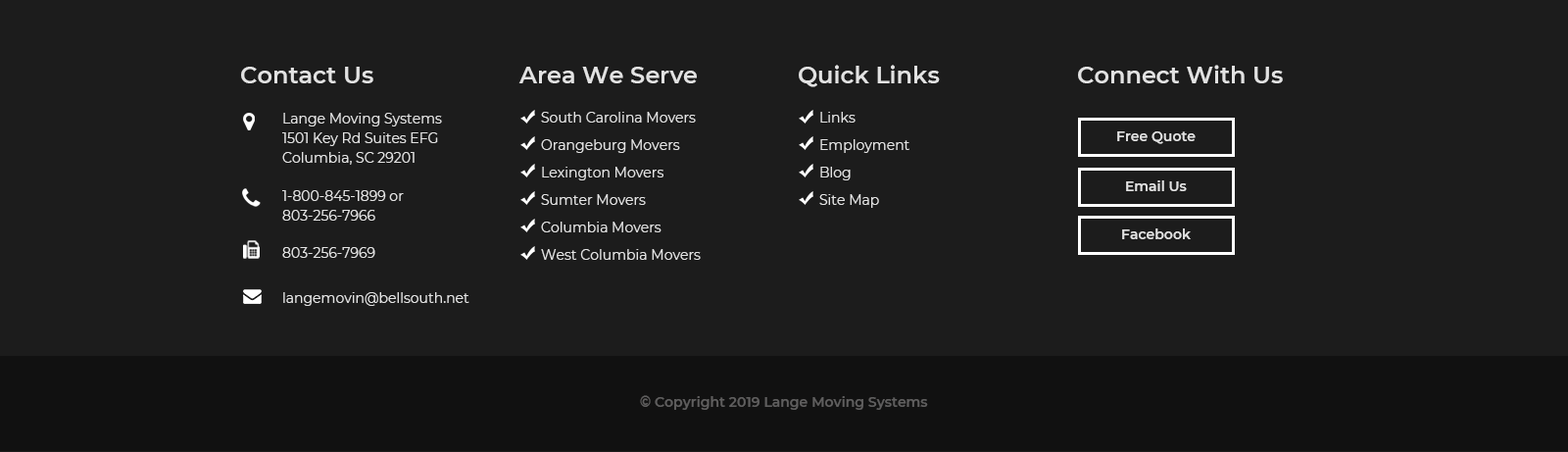
<style>
.page{position:relative;width:1568px;height:452px;background:#1c1c1c}
.page>*{position:absolute;margin:0}
.t1{font:23.5px "Montserrat-SemiBold";color:#e2e2e2}
.t2{font:13.7px/19.6px "Montserrat-Regular";color:#e2e2e2}
.t3{font:13.7px/27.4px "Montserrat-Regular";color:#e2e2e2}
.t4{font:13.7px "Montserrat-SemiBold";color:#e2e2e2}
.t5{font:13.7px "Montserrat-Regular";color:#e2e2e2}
.t6{font:13.7px "Montserrat-SemiBold";color:#5f5e5e}
</style>
<div class="page">
<p class="t1" style="left:799px;top:65px;width:141px;height:22px">Quick Links</p>
<p class="t1" style="left:1078px;top:65px;width:205px;height:18px">Connect With Us</p>
<p class="t1" style="left:241px;top:67px;width:132px;height:16px">Contact Us</p>
<p class="t1" style="left:518px;top:67px;width:179px;height:16px">Area We Serve</p>
<p class="t2" style="left:282px;top:113px;width:160px;height:52px">Lange Moving Systems<br>1501 Key Rd Suites EFG<br>Columbia, SC 29201</p>
<p class="t3" style="left:541px;top:112px;width:160px;height:148px">South Carolina Movers<br>Orangeburg Movers<br>Lexington Movers<br>Sumter Movers<br>Columbia Movers<br>West Columbia Movers</p>
<p class="t3" style="left:819px;top:112px;width:90px;height:96px">Links<br>Employment<br>Blog<br>Site Map</p>
<p class="t4" style="left:1117px;top:131px;width:79px;height:13px">Free Quote</p>
<p class="t4" style="left:1126px;top:180px;width:61px;height:11px">Email Us</p>
<p class="t2" style="left:282px;top:190px;width:122px;height:30px">1-800-845-1899 or<br>803-256-7966</p>
<p class="t4" style="left:1122px;top:228px;width:69px;height:11px">Facebook</p>
<p class="t5" style="left:282px;top:247px;width:93px;height:11px">803-256-7969</p>
<p class="t5" style="left:283px;top:292px;width:186px;height:14px">langemovin@bellsouth.net</p>
<p class="t6" style="left:640px;top:395px;width:288px;height:15px">© Copyright 2019 Lange Moving Systems</p>
</div>
